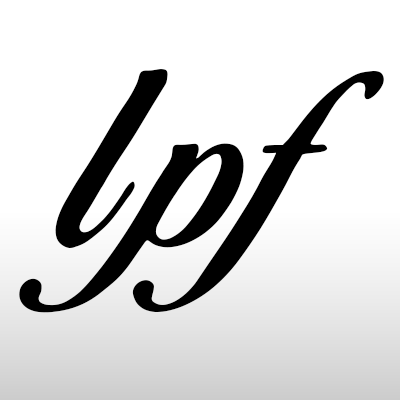
<style>
.page{position:relative;width:400px;height:400px;background:#ffffff}
.page>*{position:absolute;margin:0}
.t1{font:252px "BirdsofParadise";letter-spacing:0.005em;color:#000000}
.t2{font:252px "BirdsofParadise";letter-spacing:0.1em;color:#000000}
</style>
<div class="page">
<p class="t1" style="left:19px;top:69px;width:365px;height:244px"><span class="t2">l</span>pf</p>
</div>
